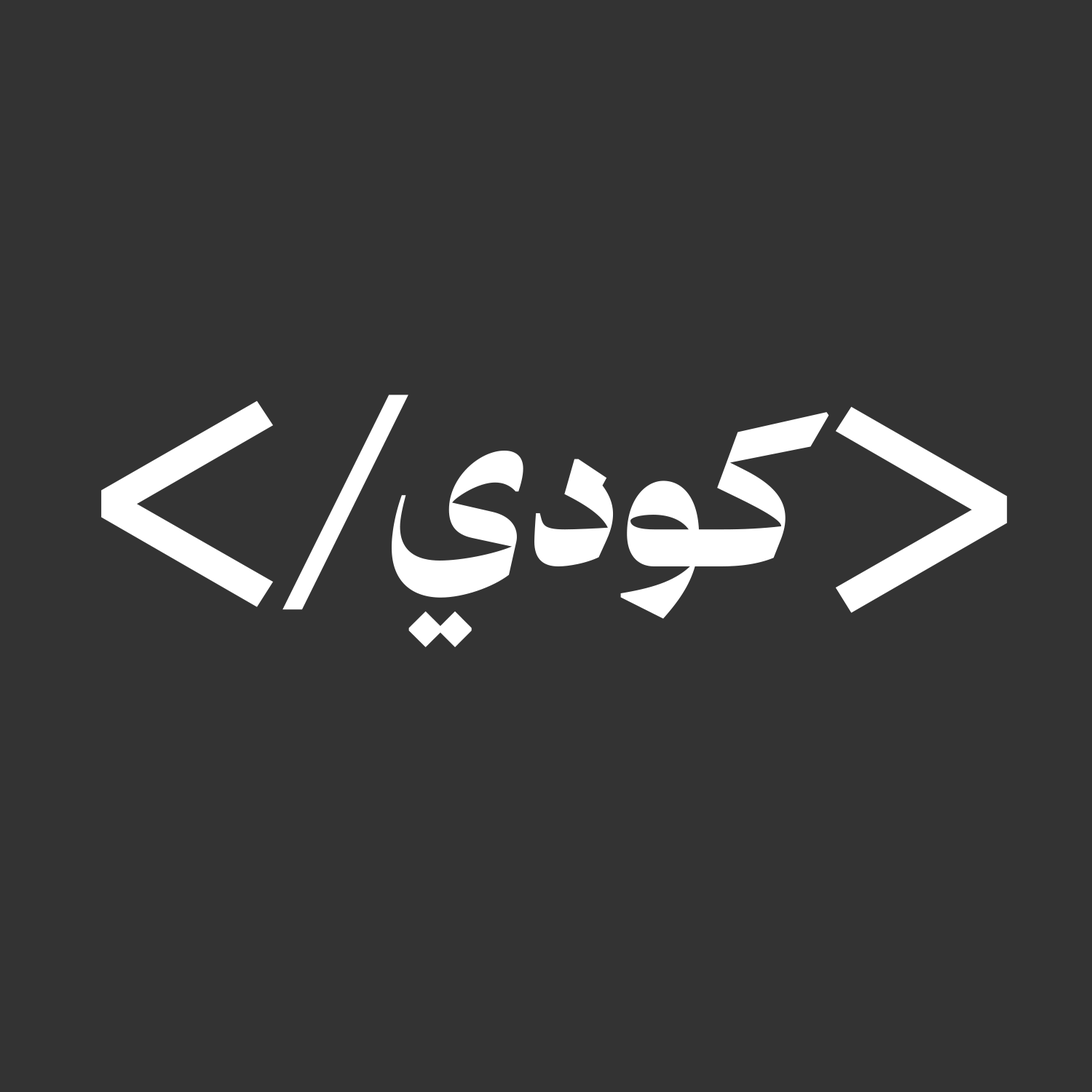
<style>
.page{position:relative;width:1092px;height:1092px;background:#333333}
.page>*{position:absolute;margin:0}
.t1{font:433.5px "ReadexPro-Light";color:#ffffff}
.t2{font:261.6px "ReadexPro-Light";color:#ffffff}
.t3{font:195.5px "thmanyahserifdisplay-Black";color:#ffffff}
</style>
<div class="page">
<p class="t1" style="left:101px;top:400px;width:172px;height:207px">&lt;</p>
<p class="t2" style="left:282px;top:395px;width:126px;height:215px">/</p>
<p class="t3" style="left:392px;top:412px;width:437px;height:235px">كودي</p>
<p class="t1" style="left:835px;top:406px;width:173px;height:207px">&gt;</p>
</div>
